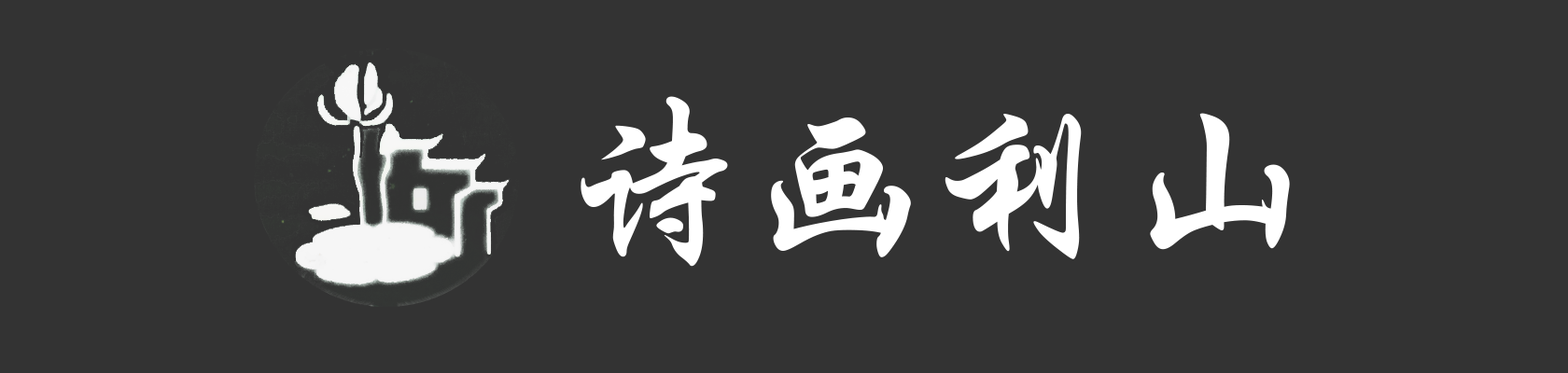
<style>
.page{position:relative;width:1568px;height:373px;background:#333333}
.page>*{position:absolute;margin:0}
.t1{font:186.7px "STXingkai";color:#ffffff}
</style>
<div class="page">
<p class="t1" style="left:581px;top:96px;width:709px;height:171px">诗画利山</p>
</div>
